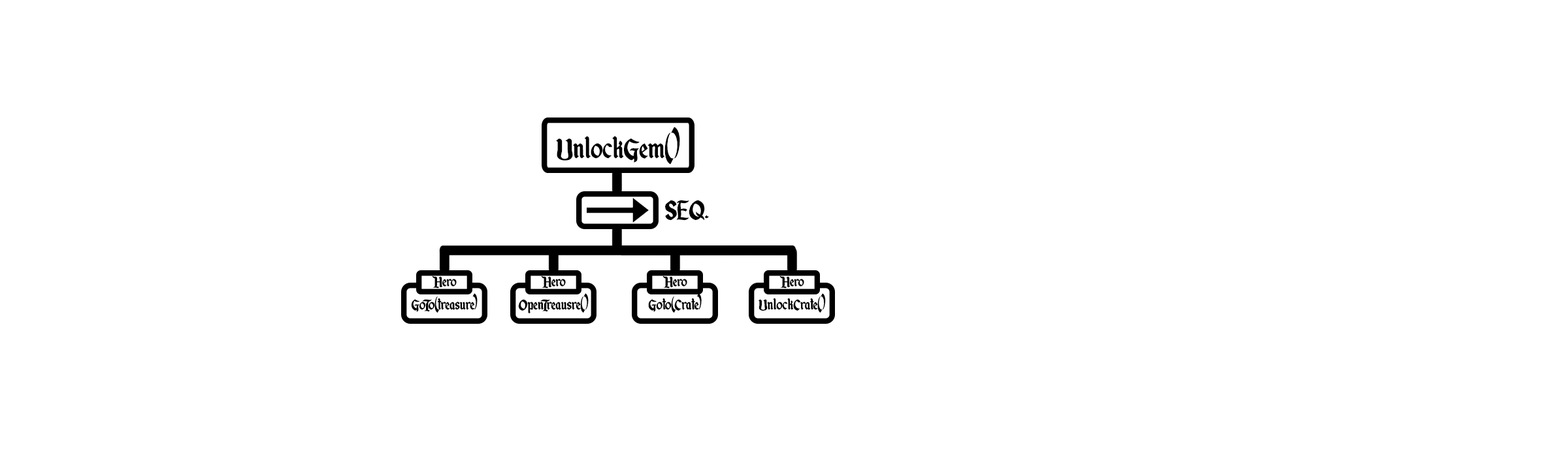
<style>
.page{position:relative;width:1568px;height:470px;background:#ffffff}
.page>*{position:absolute;margin:0}
.t1{font:43.3px "Started-by-a-Mouse";color:#000000}
.t2{font:39.3px "Started-by-a-Mouse";color:#000000}
.t3{font:21.3px "Started-by-a-Mouse";color:#000000}
.t4{font:22.2px "Started-by-a-Mouse";color:#000000}
</style>
<div class="page">
<p class="t1" style="left:556px;top:127px;width:124px;height:38px">UnlockGem()</p>
<p class="t2" style="left:665px;top:200px;width:44px;height:21px">SEQ.</p>
<p class="t3" style="left:432px;top:276px;width:25px;height:13px">Hero</p>
<p class="t3" style="left:541px;top:276px;width:25px;height:13px">Hero</p>
<p class="t3" style="left:662px;top:276px;width:25px;height:13px">Hero</p>
<p class="t3" style="left:779px;top:276px;width:25px;height:13px">Hero</p>
<p class="t4" style="left:411px;top:293px;width:67px;height:20px">GoTo(treasure)</p>
<p class="t4" style="left:518px;top:293px;width:71px;height:21px">OpenTreausre()</p>
<p class="t4" style="left:648px;top:293px;width:54px;height:20px">Goto(Crate)</p>
<p class="t4" style="left:759px;top:293px;width:67px;height:20px">UnlockCrate()</p>
</div>
